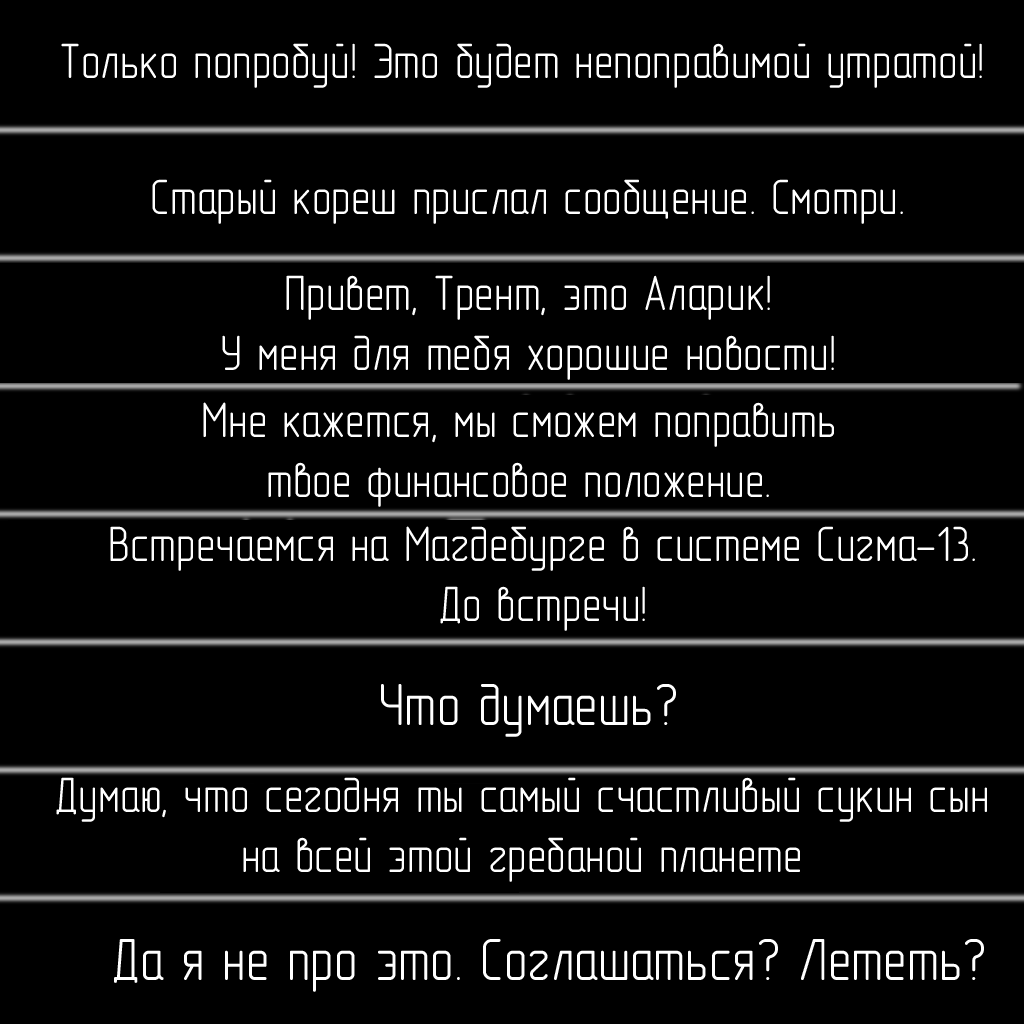
<style>
.page{position:relative;width:1024px;height:1024px;background:#000000}
.page>*{position:absolute;margin:0}
.t1{font:50px "GOST-2.304-81typeA";color:#ffffff}
.t2{font:60px "GOST-2.304-81typeA";color:#ffffff}
</style>
<div class="page">
<p class="t1" style="left:61px;top:43px;width:921px;height:45px">Только попробуй! Это будет непоправимой утратой!</p>
<p class="t1" style="left:152px;top:179px;width:751px;height:45px">Старый кореш прислал сообщение. Смотри.</p>
<p class="t1" style="left:222px;top:275px;width:612px;height:105px;text-align:center">Привет, Трент, это Аларик!<br>У меня для тебя хорошие новости!</p>
<p class="t1" style="left:203px;top:402px;width:631px;height:105px;text-align:center">Мне кажется, мы сможем поправить<br>твое финансовое положение.</p>
<p class="t1" style="left:110px;top:526px;width:865px;height:105px;text-align:center">Встречаемся на Магдебурге в системе Сигма-13.<br>До встречи!</p>
<p class="t2" style="left:381px;top:684px;width:295px;height:53px">Что думаешь?</p>
<p class="t1" style="left:56px;top:777px;width:931px;height:105px;text-align:center">Думаю, что сегодня ты самый счастливый сукин сын<br>на всей этой гребаной планете</p>
<p class="t2" style="left:114px;top:939px;width:870px;height:53px">Да я не про это. Соглашаться? Лететь?</p>
</div>
